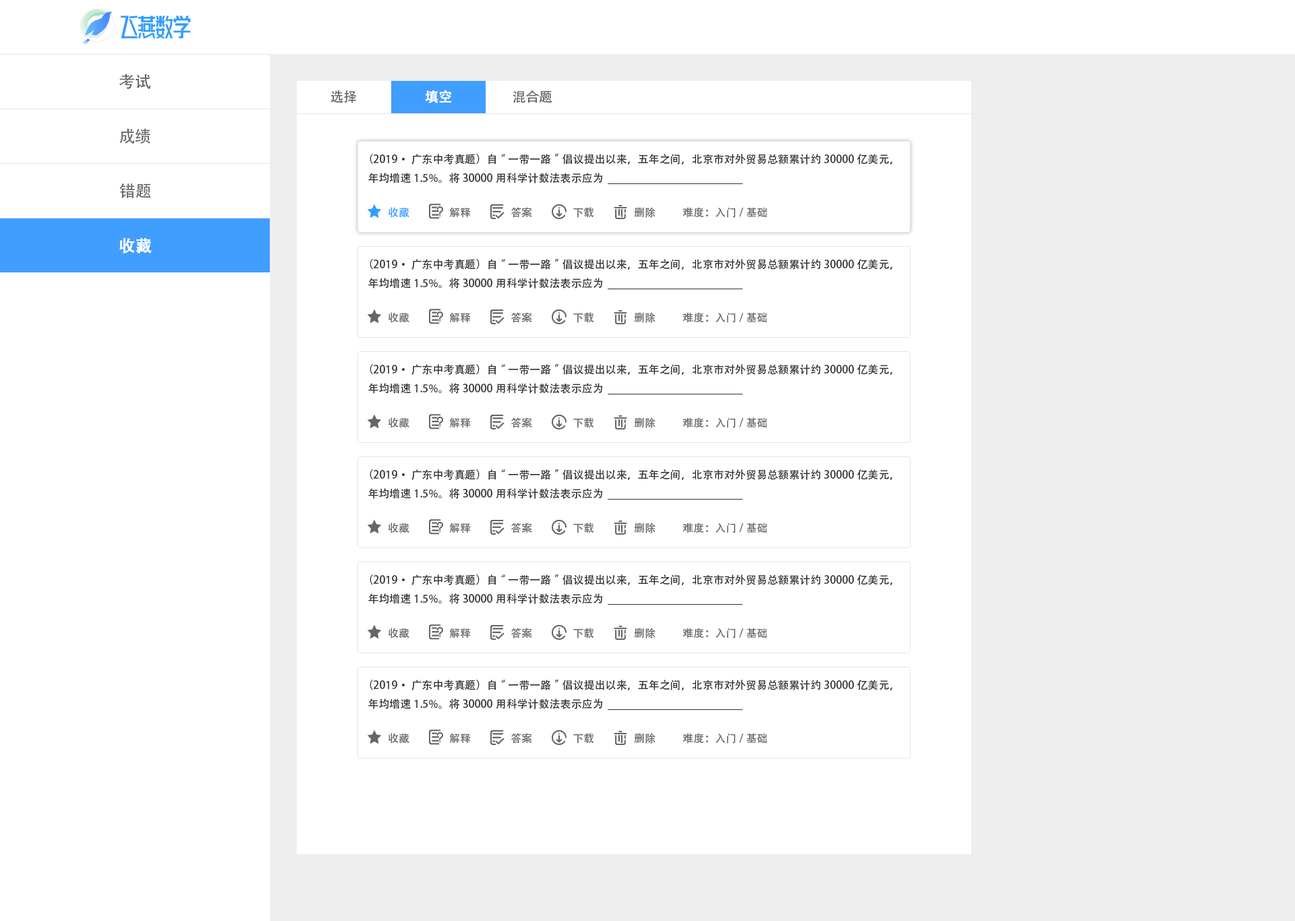
<style>
.page{position:relative;width:1295px;height:921px;background:#ffffff}
.page>*{position:absolute;margin:0}
.t1{font:16.2px "AdobeHeitiStd-Regular";color:#666666}
.t2{font:13.5px "AdobeHeitiStd-Regular";color:#666666}
.t3{font:13.5px "AdobeHeitiStd-Regular";color:#ffffff;font-weight:bold}
.t4{font:10.8px "AdobeHeitiStd-Regular";color:#333333}
.t5{font:10.8px "AdobeHeitiStd-Regular";color:#339dff}
.t6{font:10.8px "AdobeHeitiStd-Regular";color:#666666}
.t7{font:16.2px "AdobeHeitiStd-Regular";color:#ffffff;font-weight:bold}
</style>
<div class="page">
<p class="t1" style="left:119px;top:73px;width:32px;height:16px">考试</p>
<p class="t2" style="left:330px;top:90px;width:27px;height:13px">选择</p>
<p class="t3" style="left:425px;top:90px;width:26px;height:13px">填空</p>
<p class="t2" style="left:512px;top:90px;width:40px;height:13px">混合题</p>
<p class="t1" style="left:119px;top:128px;width:31px;height:16px">成绩</p>
<p class="t4" style="left:368px;top:154px;width:524px;height:29px">（2019·广东中考真题）自“一带一路”倡议提出以来，五年之间，北京市对外贸易总额累计约30000亿美元，年均增速1.5%。将30000用科学计数法表示应为</p>
<p class="t1" style="left:119px;top:183px;width:32px;height:15px">错题</p>
<p class="t5" style="left:388px;top:207px;width:21px;height:11px">收藏</p>
<p class="t6" style="left:449px;top:207px;width:22px;height:11px">解释</p>
<p class="t6" style="left:510px;top:207px;width:22px;height:11px">答案</p>
<p class="t6" style="left:573px;top:207px;width:20px;height:11px">下载</p>
<p class="t6" style="left:634px;top:207px;width:21px;height:11px">删除</p>
<p class="t6" style="left:682px;top:207px;width:85px;height:11px">难度：入门/基础</p>
<p class="t7" style="left:119px;top:238px;width:33px;height:16px">收藏</p>
<p class="t4" style="left:368px;top:259px;width:524px;height:30px">（2019·广东中考真题）自“一带一路”倡议提出以来，五年之间，北京市对外贸易总额累计约30000亿美元，年均增速1.5%。将30000用科学计数法表示应为</p>
<p class="t6" style="left:388px;top:312px;width:21px;height:11px">收藏</p>
<p class="t6" style="left:449px;top:312px;width:22px;height:11px">解释</p>
<p class="t6" style="left:510px;top:312px;width:22px;height:11px">答案</p>
<p class="t6" style="left:573px;top:312px;width:20px;height:11px">下载</p>
<p class="t6" style="left:634px;top:312px;width:21px;height:11px">删除</p>
<p class="t6" style="left:682px;top:312px;width:85px;height:11px">难度：入门/基础</p>
<p class="t4" style="left:368px;top:364px;width:524px;height:30px">（2019·广东中考真题）自“一带一路”倡议提出以来，五年之间，北京市对外贸易总额累计约30000亿美元，年均增速1.5%。将30000用科学计数法表示应为</p>
<p class="t6" style="left:388px;top:417px;width:21px;height:11px">收藏</p>
<p class="t6" style="left:449px;top:417px;width:22px;height:11px">解释</p>
<p class="t6" style="left:510px;top:417px;width:22px;height:11px">答案</p>
<p class="t6" style="left:573px;top:417px;width:20px;height:11px">下载</p>
<p class="t6" style="left:634px;top:417px;width:21px;height:11px">删除</p>
<p class="t6" style="left:682px;top:417px;width:85px;height:11px">难度：入门/基础</p>
<p class="t4" style="left:368px;top:469px;width:524px;height:30px">（2019·广东中考真题）自“一带一路”倡议提出以来，五年之间，北京市对外贸易总额累计约30000亿美元，年均增速1.5%。将30000用科学计数法表示应为</p>
<p class="t6" style="left:388px;top:523px;width:21px;height:10px">收藏</p>
<p class="t6" style="left:449px;top:523px;width:22px;height:10px">解释</p>
<p class="t6" style="left:510px;top:523px;width:22px;height:10px">答案</p>
<p class="t6" style="left:573px;top:523px;width:20px;height:10px">下载</p>
<p class="t6" style="left:634px;top:523px;width:21px;height:10px">删除</p>
<p class="t6" style="left:682px;top:523px;width:85px;height:10px">难度：入门/基础</p>
<p class="t4" style="left:368px;top:574px;width:524px;height:30px">（2019·广东中考真题）自“一带一路”倡议提出以来，五年之间，北京市对外贸易总额累计约30000亿美元，年均增速1.5%。将30000用科学计数法表示应为</p>
<p class="t6" style="left:388px;top:628px;width:21px;height:11px">收藏</p>
<p class="t6" style="left:449px;top:628px;width:22px;height:11px">解释</p>
<p class="t6" style="left:510px;top:628px;width:22px;height:11px">答案</p>
<p class="t6" style="left:573px;top:628px;width:20px;height:11px">下载</p>
<p class="t6" style="left:634px;top:628px;width:21px;height:11px">删除</p>
<p class="t6" style="left:682px;top:628px;width:85px;height:11px">难度：入门/基础</p>
<p class="t4" style="left:368px;top:680px;width:524px;height:29px">（2019·广东中考真题）自“一带一路”倡议提出以来，五年之间，北京市对外贸易总额累计约30000亿美元，年均增速1.5%。将30000用科学计数法表示应为</p>
<p class="t6" style="left:388px;top:733px;width:21px;height:11px">收藏</p>
<p class="t6" style="left:449px;top:733px;width:22px;height:11px">解释</p>
<p class="t6" style="left:510px;top:733px;width:22px;height:11px">答案</p>
<p class="t6" style="left:573px;top:733px;width:20px;height:11px">下载</p>
<p class="t6" style="left:634px;top:733px;width:21px;height:11px">删除</p>
<p class="t6" style="left:682px;top:733px;width:85px;height:11px">难度：入门/基础</p>
</div>
